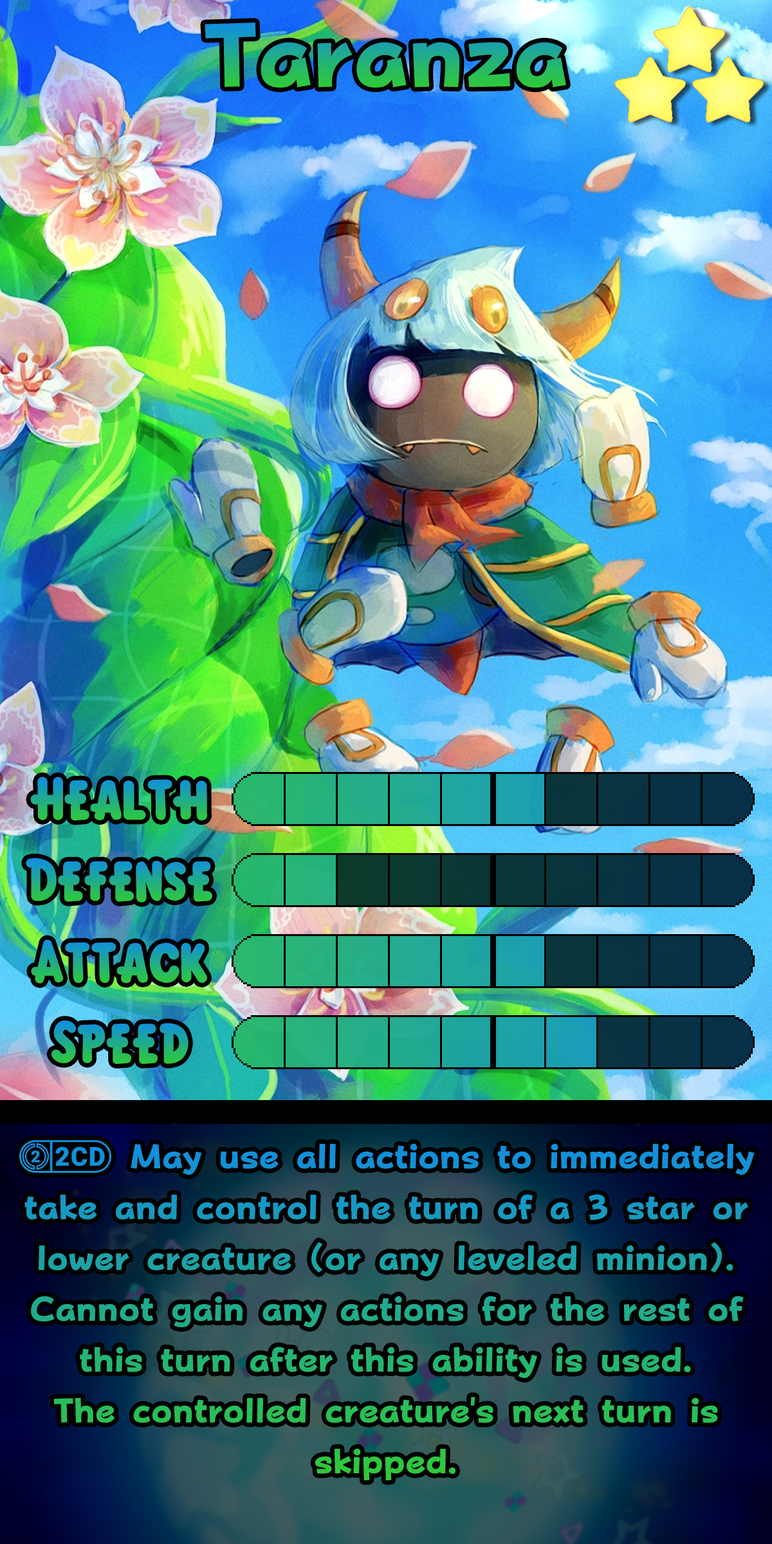
<style>
.page{position:relative;width:772px;height:1544px}
.page>*{position:absolute;margin:0}
.t1{font:155.7px "FOTPopHappinessStrp-ExtraBold"}
.t2{font:92.7px "KirbyClassic"}
.t3{font:58.6px/50.8px "FOTPopHappinessStrp-ExtraBold"}
.t4{font:58.6px/50.8px "stoogedings-Regular"}
</style>
<div class="page">
<p class="t1" style="left:205px;top:23px;width:361px;height:65px">Taranza</p>
<p class="t2" style="left:30px;top:777px;width:178px;height:44px">Health</p>
<p class="t2" style="left:26px;top:858px;width:186px;height:45px">Defense</p>
<p class="t2" style="left:31px;top:939px;width:176px;height:45px">Attack</p>
<p class="t2" style="left:51px;top:1021px;width:138px;height:43px">Speed</p>
<p class="t3" style="left:19px;top:1140px;width:736px;height:341px;text-align:center"><span class="t4">(2CD)</span> May use all actions to immediately take and control the turn of a 3 star or lower creature (or any leveled minion). Cannot gain any actions for the rest of this turn after this ability is used.<br>The controlled creature's next turn is skipped.</p>
</div>
